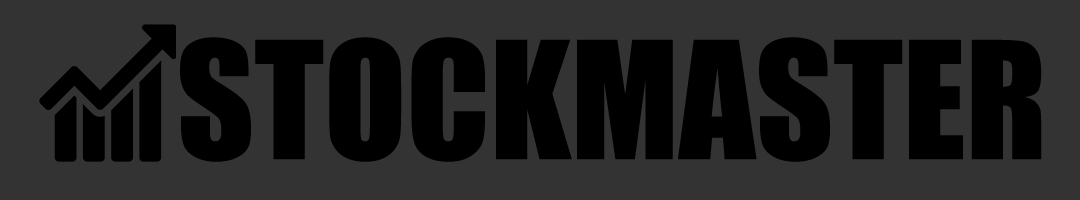
<style>
.page{position:relative;width:1080px;height:200px;background:#333333}
.page>*{position:absolute;margin:0}
.t1{font:150.8px "Impact";color:#000000}
</style>
<div class="page">
<p class="t1" style="left:180px;top:37px;width:862px;height:125px">STOCKMASTER</p>
</div>
